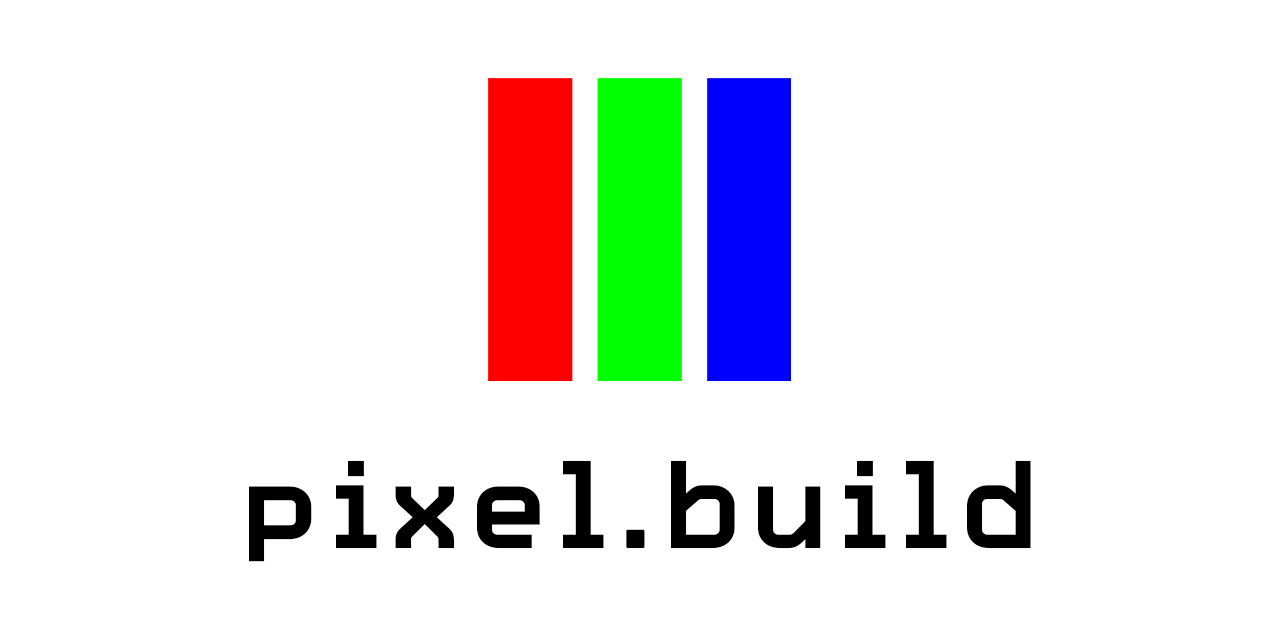
<style>
.page{position:relative;width:1280px;height:640px;background:#ffffff}
.page>*{position:absolute;margin:0}
.t1{font:150px "Carbon-Bold";color:#000000}
</style>
<div class="page">
<p class="t1" style="left:249px;top:460px;width:782px;height:102px">pixel.build</p>
</div>
